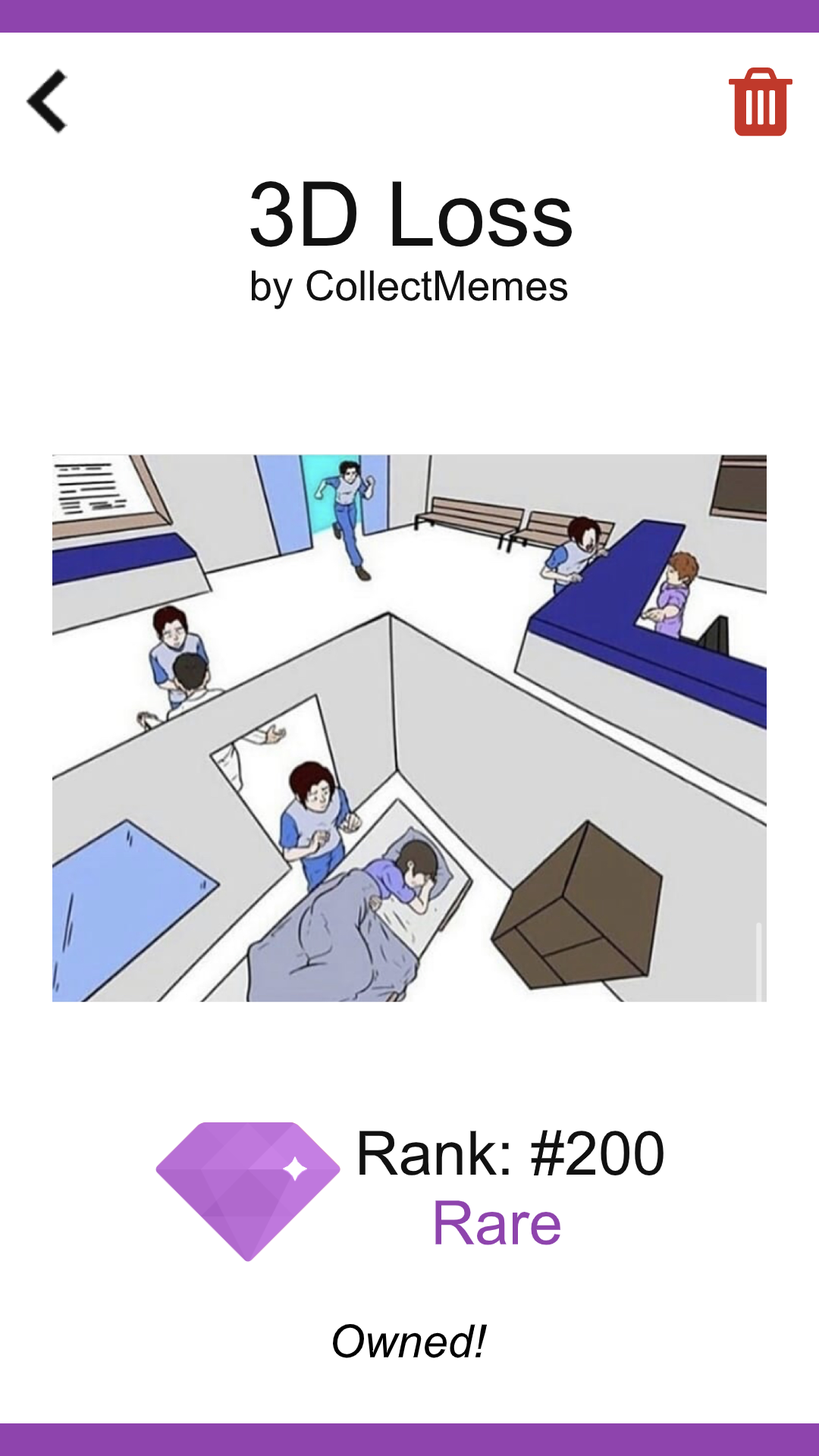
<style>
.page{position:relative;width:819px;height:1456px;background:#ffffff}
.page>*{position:absolute;margin:0}
.t1{font:89.5px "ArialMT";color:#111111}
.t2{font:41.7px "ArialMT";color:#111111}
.t3{font:60.9px "ArialMT";color:#111111}
.t4{font:60.9px "ArialMT";color:#8e44ad}
.t5{font:45.5px "Arial-ItalicMT";color:#000000}
</style>
<div class="page">
<p class="t1" style="left:250px;top:181px;width:322px;height:66px">3D Loss</p>
<p class="t2" style="left:252px;top:270px;width:316px;height:39px">by CollectMemes</p>
<p class="t3" style="left:359px;top:1130px;width:305px;height:45px">Rank: #200</p>
<p class="t4" style="left:435px;top:1200px;width:125px;height:45px">Rare</p>
<p class="t5" style="left:333px;top:1324px;width:154px;height:34px">Owned!</p>
</div>
